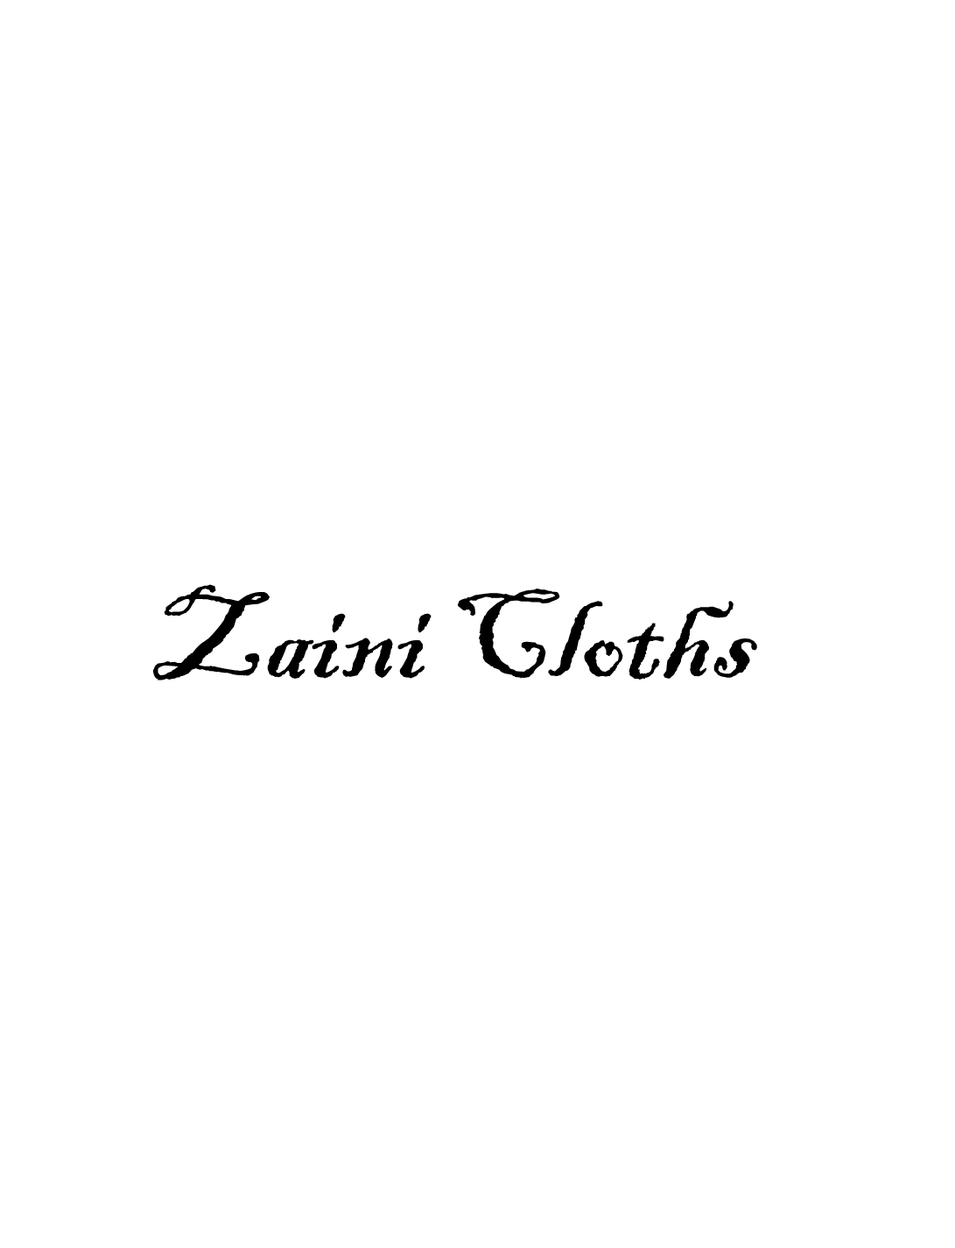
<style>
.page{position:relative;width:955px;height:1248px;background:#ffffff}
.page>*{position:absolute;margin:0}
.t1{font:131.4px "BlackadderITC-Regular";color:#000000}
</style>
<div class="page">
<p class="t1" style="left:153px;top:584px;width:605px;height:96px">Zaini Cloths</p>
</div>
